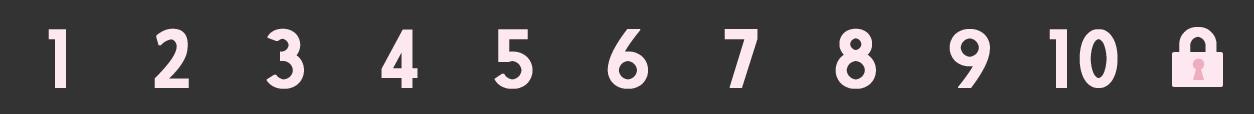
<style>
.page{position:relative;width:1254px;height:114px;background:#333333}
.page>*{position:absolute;margin:0}
.t1{font:80px "MarketDeco";letter-spacing:0.04em;color:#fde8f0;font-weight:bold}
</style>
<div class="page">
<p class="t1" style="left:48px;top:29px;width:18px;height:59px">1</p>
<p class="t1" style="left:154px;top:28px;width:35px;height:60px">2</p>
<p class="t1" style="left:266px;top:28px;width:38px;height:61px">3</p>
<p class="t1" style="left:381px;top:29px;width:37px;height:59px">4</p>
<p class="t1" style="left:494px;top:29px;width:39px;height:60px">5</p>
<p class="t1" style="left:607px;top:29px;width:41px;height:60px">6</p>
<p class="t1" style="left:724px;top:29px;width:34px;height:59px">7</p>
<p class="t1" style="left:835px;top:28px;width:41px;height:61px">8</p>
<p class="t1" style="left:949px;top:29px;width:41px;height:59px">9</p>
<p class="t1" style="left:1049px;top:29px;width:69px;height:59px">10</p>
<p class="t1" style="left:1179px;top:27px;width:38px;height:59px;rotate:180deg">u</p>
</div>
